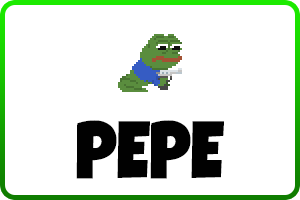
<style>
.page{position:relative;width:300px;height:200px;background:#ffffff}
.page>*{position:absolute;margin:0}
.t1{font:80.5px "LuckiestGuy-Regular";letter-spacing:-0.01em;color:#010101;text-transform:uppercase;scale:0.87 1}
</style>
<div class="page">
<p class="t1" style="left:76px;top:120px;width:148px;height:59px">pepe</p>
</div>
